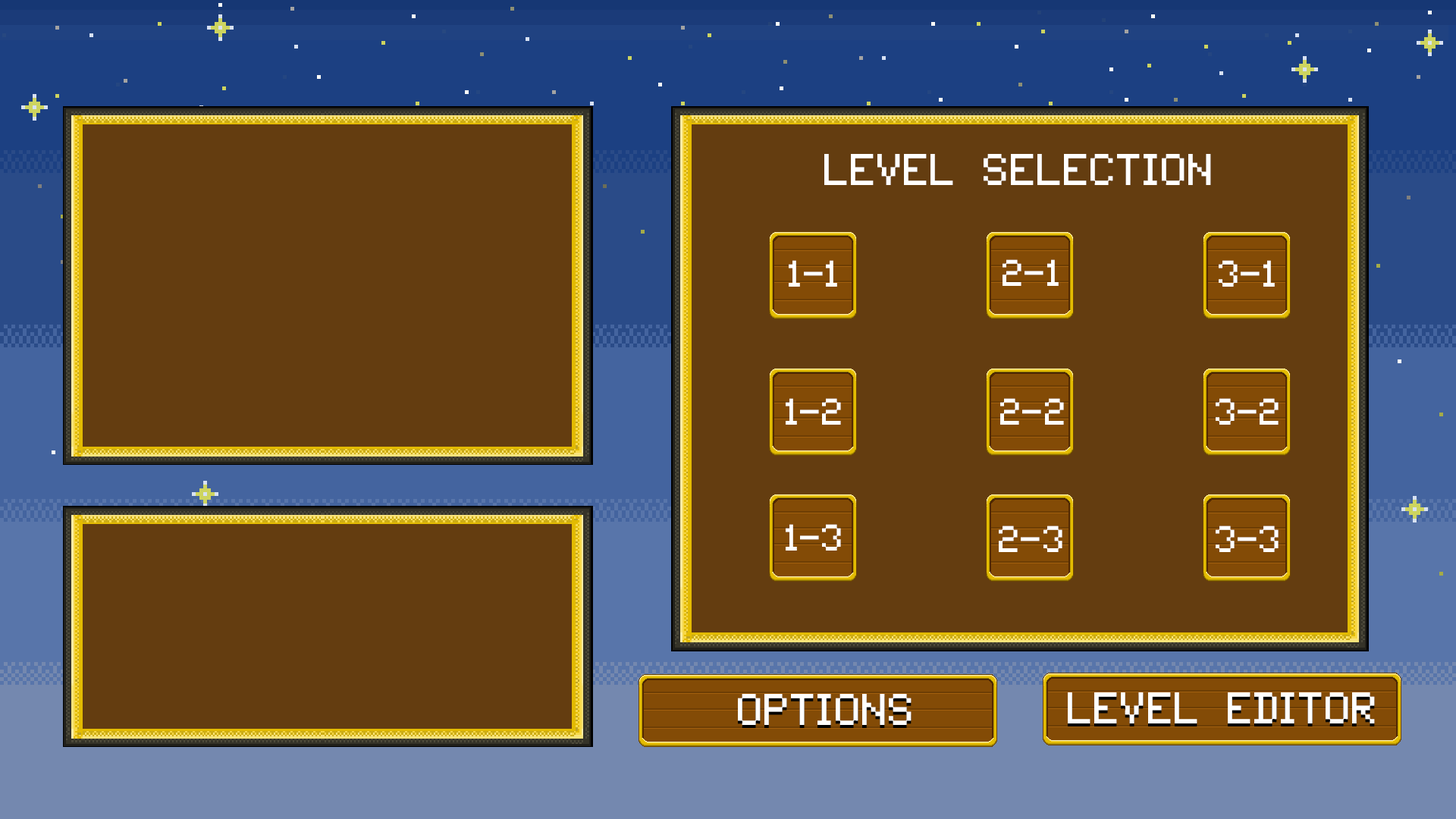
<style>
.page{position:relative;width:1456px;height:819px;background:#643d10}
.page>*{position:absolute;margin:0}
.t1{font:45.5px "Tandysoft";color:#fffffe}
.t2{font:37.9px "Tandysoft";color:#fffffe}
</style>
<div class="page">
<p class="t1" style="left:824px;top:154px;width:387px;height:31px">level selection</p>
<p class="t2" style="left:1003px;top:259px;width:56px;height:27px">2-1</p>
<p class="t2" style="left:1219px;top:260px;width:56px;height:27px">3-1</p>
<p class="t2" style="left:786px;top:398px;width:55px;height:27px">1-2</p>
<p class="t2" style="left:1000px;top:398px;width:64px;height:27px">2-2</p>
<p class="t2" style="left:1216px;top:398px;width:63px;height:27px">3-2</p>
<p class="t2" style="left:786px;top:524px;width:55px;height:27px">1-3</p>
<p class="t2" style="left:999px;top:526px;width:63px;height:26px">2-3</p>
<p class="t2" style="left:1216px;top:526px;width:63px;height:26px">3-3</p>
<p class="t1" style="left:738px;top:694px;width:174px;height:31px">options</p>
<p class="t1" style="left:1068px;top:692px;width:307px;height:31px">level editor</p>
</div>
